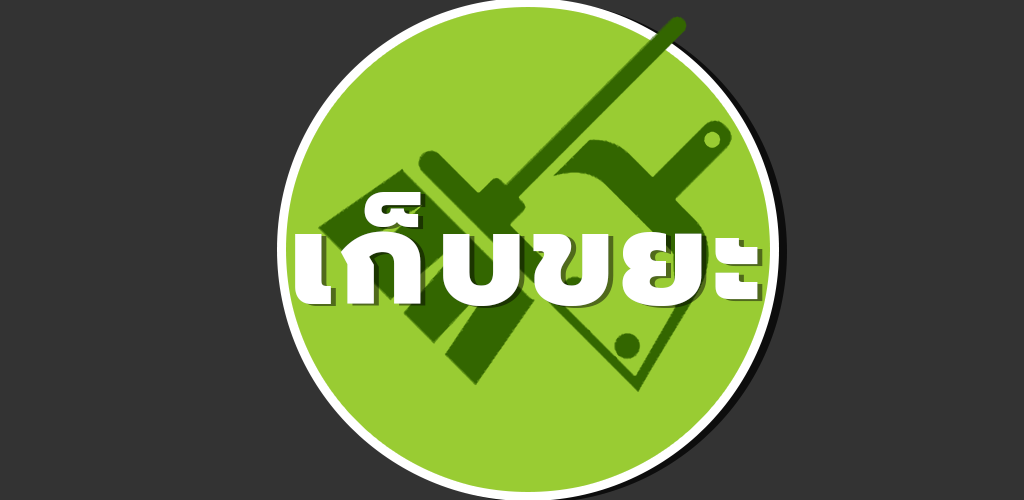
<style>
.page{position:relative;width:1024px;height:500px;background:#333333}
.page>*{position:absolute;margin:0}
.t1{font:130.6px "Prompt-ExtraBold";letter-spacing:0.05em;color:#ffffff}
</style>
<div class="page">
<p class="t1" style="left:295px;top:192px;width:463px;height:114px">เก็บขยะ</p>
</div>
